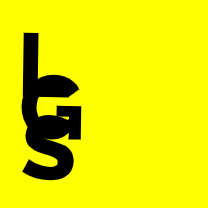
<style>
.page{position:relative;width:208px;height:208px;background:#ffff00}
.page>*{position:absolute;margin:0}
.t1{font:90px "Raleway-ExtraBold";color:#000000}
</style>
<div class="page">
<p class="t1" style="left:22px;top:32px;width:47px;height:66px;rotate:1deg">L</p>
<p class="t1" style="left:21px;top:74px;width:61px;height:66px;rotate:1deg">G</p>
<p class="t1" style="left:22px;top:115px;width:52px;height:66px;rotate:1deg">S</p>
</div>
